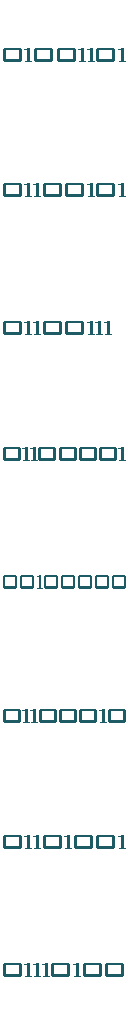
<style>
.page{position:relative;width:128px;height:1024px;background:#ffffff}
.page>*{position:absolute;margin:0}
.t1{font:27.4px "BlackHoleBB";color:#1d5c66;scale:1.22 1}
.t2{font:27.4px "BlackHoleBB";color:#1d5c66;scale:1.09 1}
.t3{font:27.4px "BlackHoleBB";color:#1d5c66;scale:0.93 1}
.t4{font:27.4px "BlackHoleBB";color:#1d5c66;scale:1.1 1}
</style>
<div class="page">
<p class="t1" style="left:3px;top:48px;width:123px;height:14px">01001101</p>
<p class="t1" style="left:3px;top:183px;width:123px;height:14px">01100101</p>
<p class="t1" style="left:3px;top:321px;width:109px;height:14px">01100111</p>
<p class="t2" style="left:3px;top:447px;width:123px;height:14px">01100001</p>
<p class="t3" style="left:3px;top:575px;width:123px;height:14px">00100000</p>
<p class="t4" style="left:3px;top:709px;width:123px;height:14px">01100010</p>
<p class="t1" style="left:3px;top:835px;width:123px;height:14px">01101001</p>
<p class="t1" style="left:3px;top:963px;width:121px;height:14px">01110100</p>
</div>
